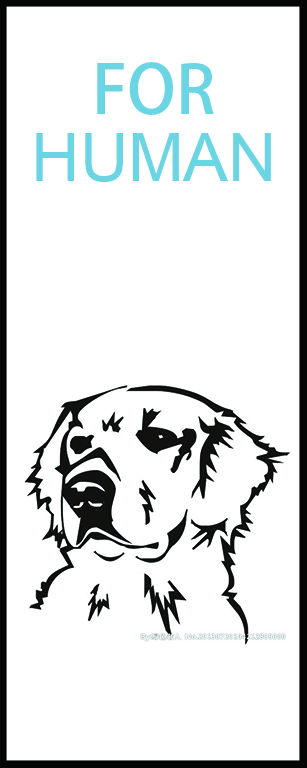
<style>
.page{position:relative;width:307px;height:768px;background:#ffffff}
.page>*{position:absolute;margin:0}
.t1{font:66.7px "AdobeHeitiStd-Regular";color:#6bd5e4}
.t2{font:66.7px "ArialMT";color:#6bd5e4}
</style>
<div class="page">
<p class="t1" style="left:97px;top:62px;width:117px;height:53px">FOR</p>
<p class="t2" style="left:36px;top:133px;width:235px;height:49px">HUMAN</p>
</div>
